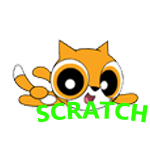
<style>
.page{position:relative;width:150px;height:150px;background:#ffffff}
.page>*{position:absolute;margin:0}
.t1{font:24px "LaoUI-Bold";color:#2cff02}
</style>
<div class="page">
<p class="t1" style="left:36px;top:101px;width:112px;height:22px">SCRATCH</p>
</div>
